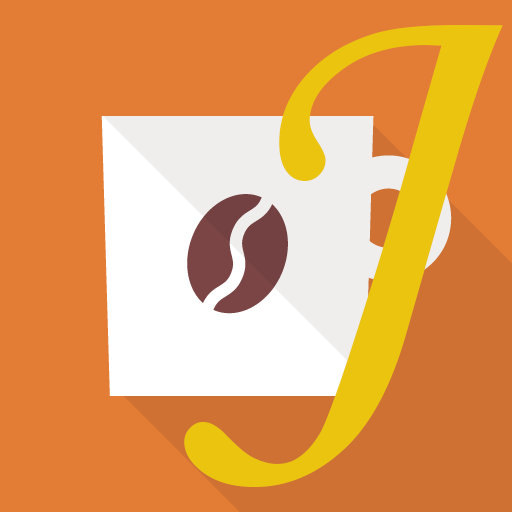
<style>
.page{position:relative;width:512px;height:512px;background:#e37c34}
.page>*{position:absolute;margin:0}
.t1{font:650px "MonotypeCorsiva";color:#ebc410}
</style>
<div class="page">
<p class="t1" style="left:184px;top:25px;width:319px;height:462px">J</p>
</div>
